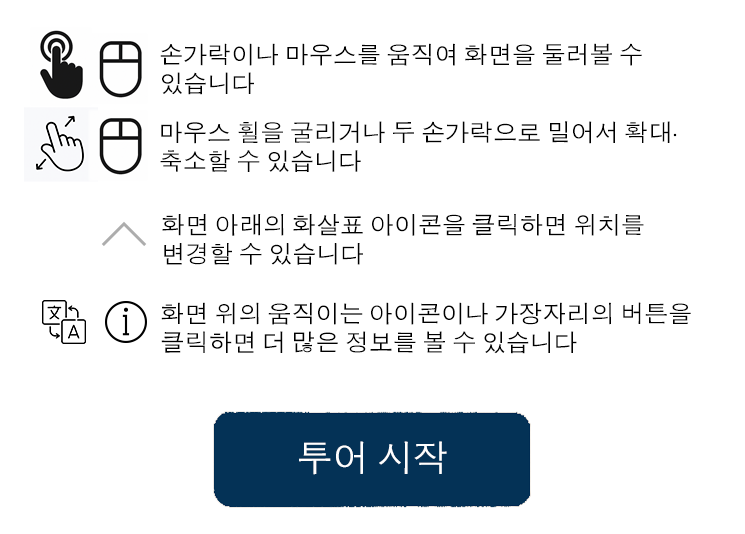
<style>
.page{position:relative;width:745px;height:534px;background:#ffffff}
.page>*{position:absolute;margin:0}
.t1{font:24px "AppleGothic";color:#000000}
.t2{font:24px "AdobeClean-Regular";color:#000000}
.t3{font:36px "AppleGothic";color:#ffffff}
</style>
<div class="page">
<p class="t1" style="left:160px;top:43px;width:482px;height:52px">손가락이나 마우스를 움직여 화면을 둘러볼 수 있습니다</p>
<p class="t1" style="left:160px;top:121px;width:517px;height:51px">마우스 휠을 굴리거나 두 손가락으로 밀어서 확대<span class="t2">·</span>축소할 수 있습니다</p>
<p class="t1" style="left:162px;top:214px;width:482px;height:51px">화면 아래의 화살표 아이콘을 클릭하면 위치를 변경할 수 있습니다</p>
<p class="t1" style="left:161px;top:302px;width:530px;height:52px">화면 위의 움직이는 아이콘이나 가장자리의 버튼을 클릭하면 더 많은 정보를 볼 수 있습니다</p>
<p class="t3" style="left:299px;top:441px;width:148px;height:34px">투어 시작</p>
</div>
